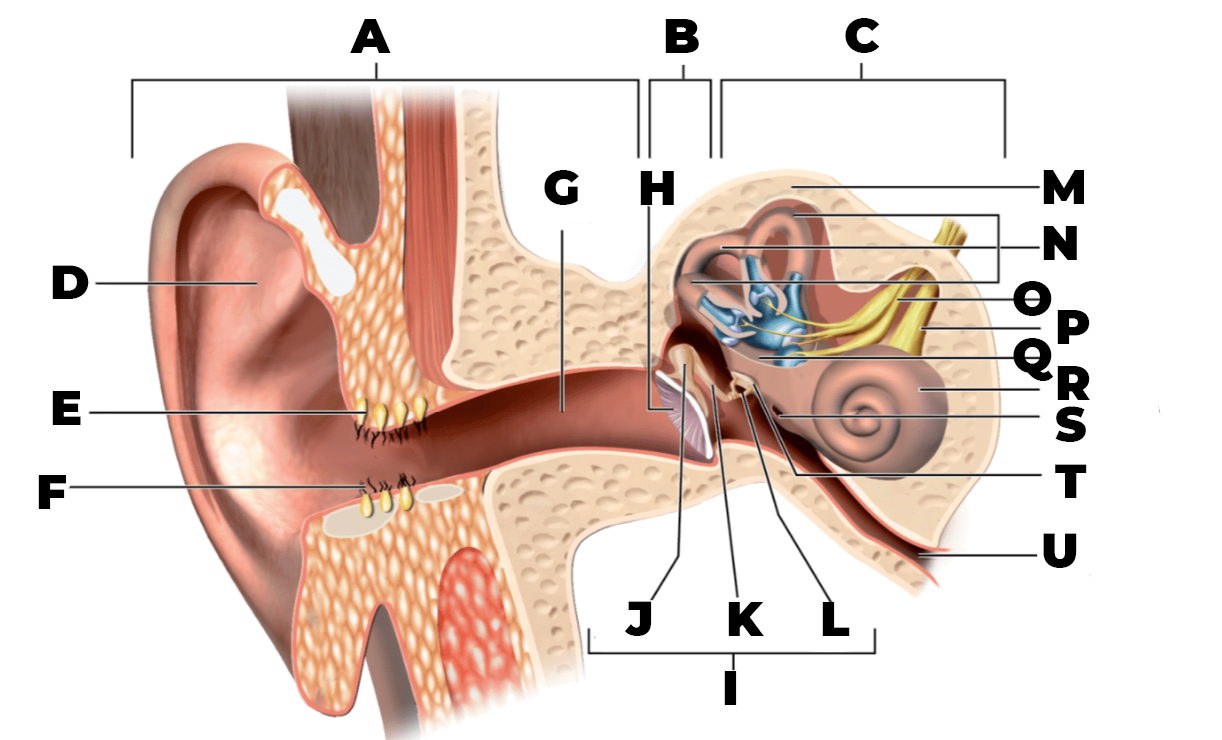
<style>
.page{position:relative;width:1222px;height:740px;background:#ffffff}
.page>*{position:absolute;margin:0}
.t1{font:48px "Montserrat-Black";color:#000000}
.t2{font:48px/14px "Montserrat-Black";color:#000000}
</style>
<div class="page">
<p class="t1" style="left:350px;top:18px;width:530px;height:35px">A                   B          C</p>
<p class="t1" style="left:544px;top:170px;width:130px;height:35px">G    H</p>
<p class="t2" style="left:1013px;top:170px;width:77px;height:398px">M<br><br><br><br>  N<br><br><br><br>O<br><br>   P<br><br>Q<br><br>   R<br><br><br>   S<br><br><br><br>   T<br><br><br><br><br>  U</p>
<p class="t2" style="left:38px;top:265px;width:51px;height:244px">D<br><br><br><br><br><br><br><br><br> E<br><br><br><br><br><br>F</p>
<p class="t1" style="left:624px;top:601px;width:226px;height:35px">J     K    L</p>
<p class="t1" style="left:724px;top:671px;width:13px;height:34px">I</p>
</div>
